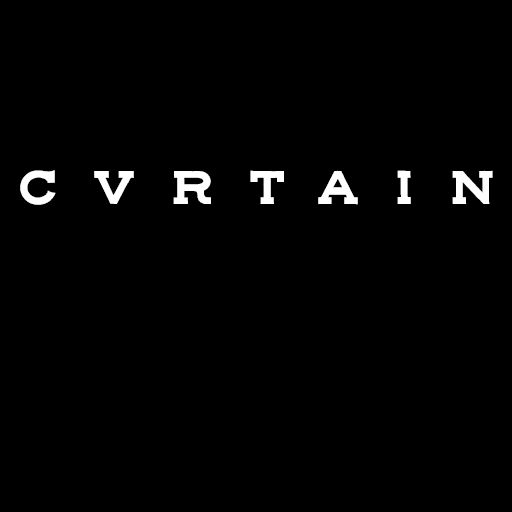
<style>
.page{position:relative;width:512px;height:512px;background:#000000}
.page>*{position:absolute;margin:0}
.t1{font:52.6px "GresleyWF";letter-spacing:0.645em;color:#ffffff}
</style>
<div class="page">
<p class="t1" style="left:20px;top:170px;width:473px;height:35px">CVRTAIN</p>
</div>
